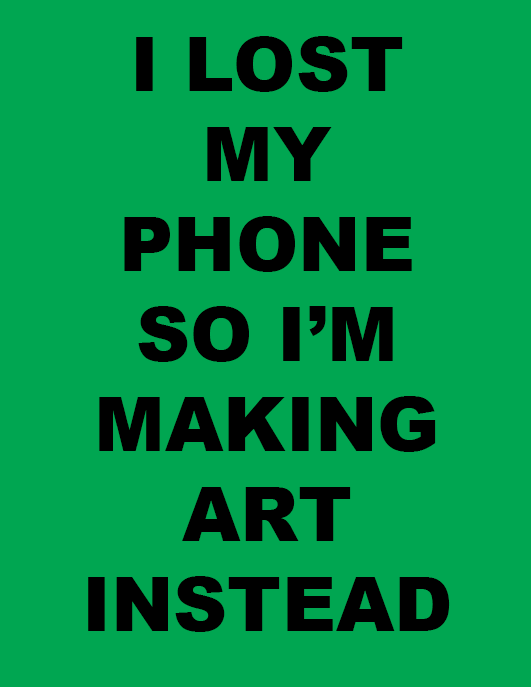
<style>
.page{position:relative;width:531px;height:687px;background:#00a651}
.page>*{position:absolute;margin:0}
.t1{font:75px "Arial-Black";color:#000000}
</style>
<div class="page">
<p class="t1" style="left:88px;top:36px;width:362px;height:596px;text-align:center">I LOST MY PHONE SO I’M MAKING ART     INSTEAD</p>
</div>
